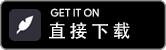
<style>
.page{position:relative;width:166px;height:50px;background:#000000}
.page>*{position:absolute;margin:0}
.t1{font:18px "AdobeHeitiStd-Regular";letter-spacing:0.2em;color:#ffffff}
</style>
<div class="page">
<p class="t1" style="left:49px;top:22px;width:81px;height:17px">直接下载</p>
</div>
